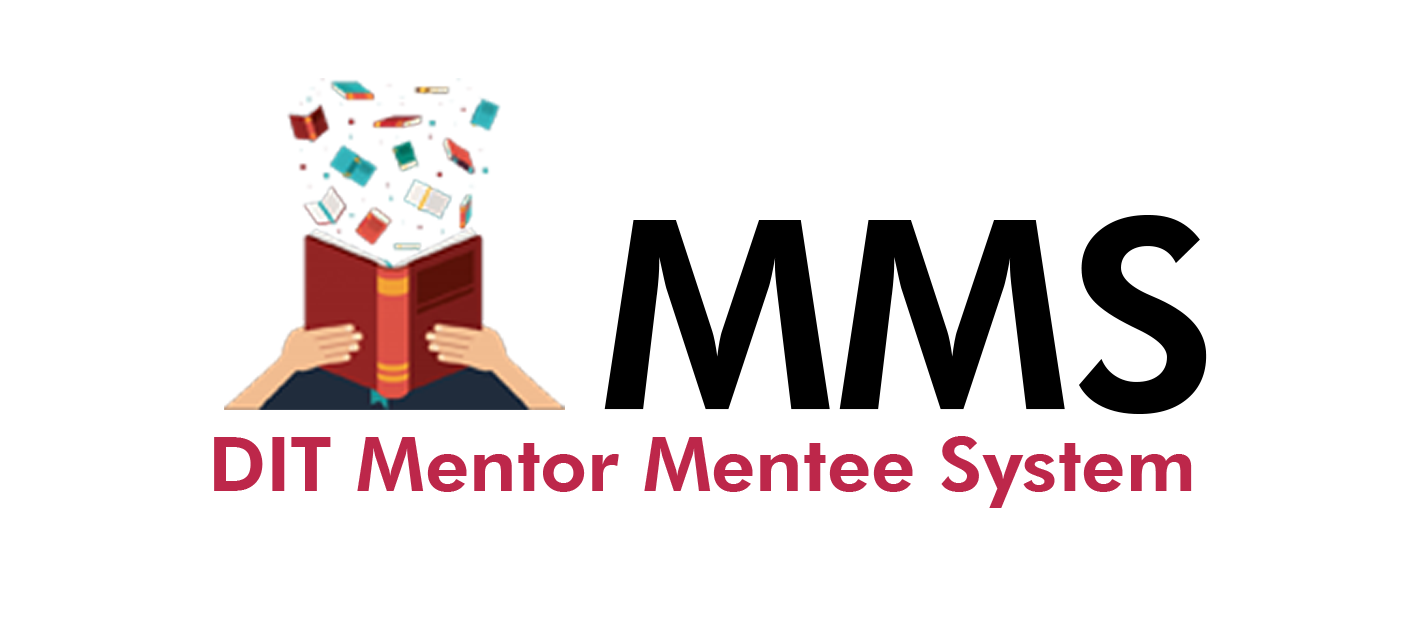
<style>
.page{position:relative;width:1411px;height:622px;background:#ffffff}
.page>*{position:absolute;margin:0}
.t1{font:264.7px "FuturaBT-Heavy";color:#000000}
.t2{font:76.1px "FuturaBT-Heavy";color:#bd274a}
</style>
<div class="page">
<p class="t1" style="left:604px;top:215px;width:603px;height:199px">MMS</p>
<p class="t2" style="left:214px;top:436px;width:978px;height:72px">DIT Mentor Mentee System</p>
</div>
